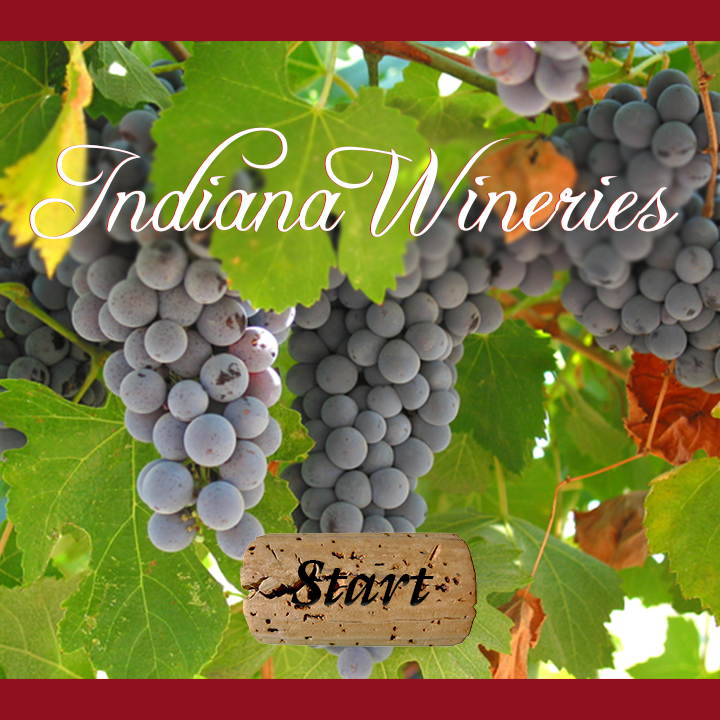
<style>
.page{position:relative;width:720px;height:720px}
.page>*{position:absolute;margin:0}
.t1{font:115px "FreebooterScript";color:#ffffff}
.t2{font:64px "JI-Respot";color:#000000}
</style>
<div class="page">
<p class="t1" style="left:29px;top:127px;width:649px;height:112px">Indiana Wineries</p>
<p class="t1" style="left:30px;top:127px;width:649px;height:112px">Indiana Wineries</p>
<p class="t2" style="left:291px;top:560px;width:143px;height:46px">Start</p>
</div>
